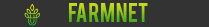
<style>
.page{position:relative;width:209px;height:27px;background:#333333}
.page>*{position:absolute;margin:0}
.t1{font:21px "Bebas"}
</style>
<div class="page">
<p class="t1" style="left:69px;top:3px;width:79px;height:19px">FARMNET</p>
</div>
